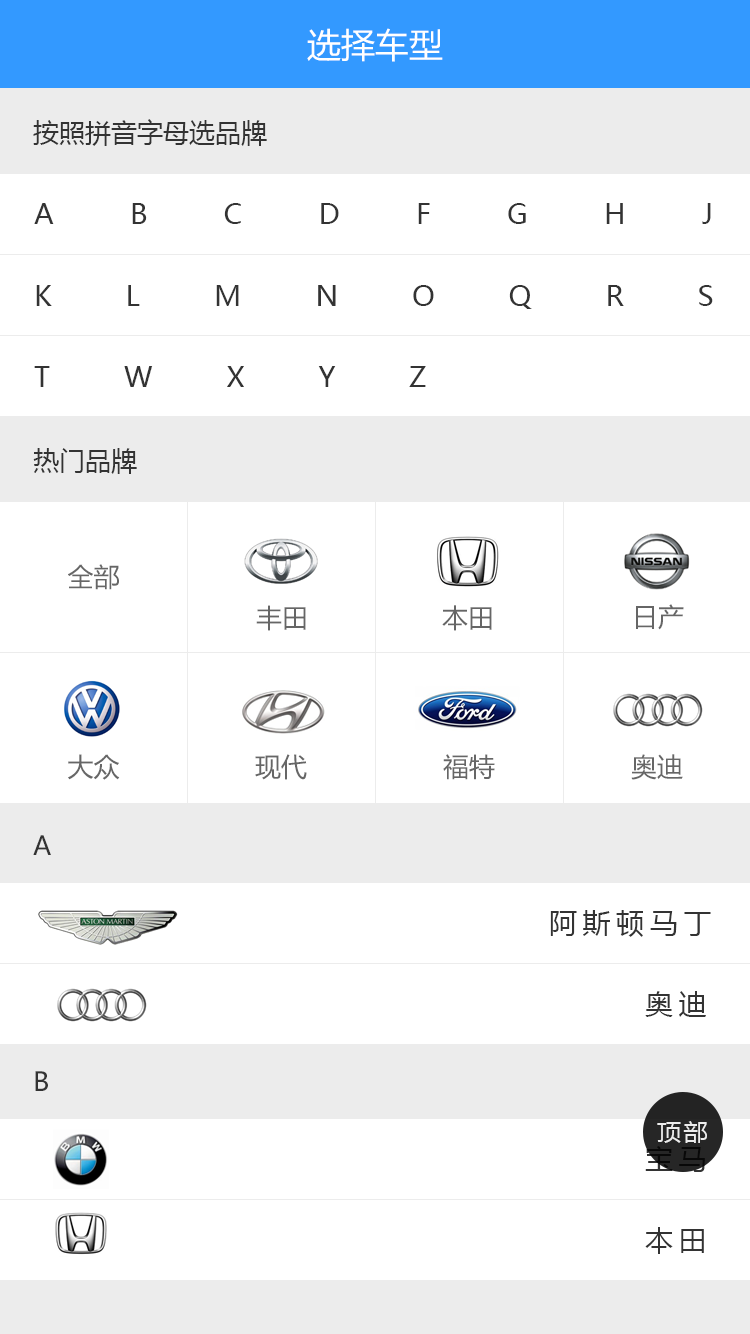
<style>
.page{position:relative;width:750px;height:1334px;background:#ffffff}
.page>*{position:absolute;margin:0}
.t1{font:34px "MicrosoftYaHei";color:#ffffff}
.t2{font:26px "MicrosoftYaHei";color:#333333}
.t3{font:28px "MicrosoftYaHei";letter-spacing:2.72em;color:#333333}
.t4{font:28px "MicrosoftYaHei";letter-spacing:2.64em;color:#333333}
.t5{font:26px "MicrosoftYaHei";color:#666666}
.t6{font:28px "MicrosoftYaHei";letter-spacing:0.2em;color:#333333}
.t7{font:24px "MicrosoftYaHei";letter-spacing:0.1em;color:#ececec}
</style>
<div class="page">
<p class="t1" style="left:307px;top:28px;width:136px;height:34px">选择车型</p>
<p class="t2" style="left:33px;top:119px;width:234px;height:27px">按照拼音字母选品牌</p>
<p class="t3" style="left:34px;top:203px;width:677px;height:21px">ABCDFGHJ</p>
<p class="t4" style="left:36px;top:285px;width:677px;height:24px">KLMNOQRS</p>
<p class="t4" style="left:34px;top:366px;width:392px;height:21px">TWXYZ</p>
<p class="t2" style="left:33px;top:448px;width:104px;height:26px">热门品牌</p>
<p class="t5" style="left:68px;top:564px;width:51px;height:26px">全部</p>
<p class="t5" style="left:256px;top:605px;width:50px;height:26px">丰田</p>
<p class="t5" style="left:442px;top:605px;width:50px;height:26px">本田</p>
<p class="t5" style="left:636px;top:604px;width:48px;height:26px">日产</p>
<p class="t5" style="left:68px;top:754px;width:52px;height:26px">大众</p>
<p class="t5" style="left:255px;top:754px;width:52px;height:26px">现代</p>
<p class="t5" style="left:443px;top:754px;width:52px;height:26px">福特</p>
<p class="t5" style="left:631px;top:754px;width:52px;height:26px">奥迪</p>
<p class="t2" style="left:33px;top:835px;width:18px;height:20px">A</p>
<p class="t6" style="left:550px;top:910px;width:161px;height:27px">阿斯顿马丁</p>
<p class="t6" style="left:645px;top:991px;width:61px;height:26px">奥迪</p>
<p class="t2" style="left:35px;top:1071px;width:13px;height:20px">B</p>
<p class="t7" style="left:657px;top:1121px;width:50px;height:22px">顶部</p>
<p class="t6" style="left:645px;top:1227px;width:59px;height:27px">本田</p>
</div>
